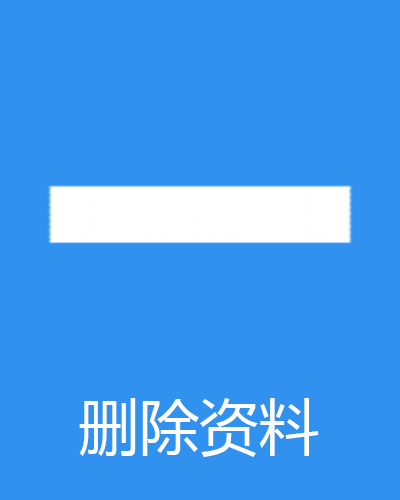
<style>
.page{position:relative;width:400px;height:500px;background:#3191ef}
.page>*{position:absolute;margin:0}
.t1{font:60px "MicrosoftYaHei";color:#ffffff}
</style>
<div class="page">
<p class="t1" style="left:79px;top:398px;width:240px;height:59px">删除资料</p>
</div>
